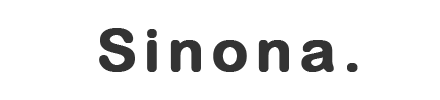
<style>
.page{position:relative;width:440px;height:100px;background:#ffffff}
.page>*{position:absolute;margin:0}
.t1{font:58.8px "ArialRoundedMTBold";letter-spacing:0.1em;color:#333333;font-weight:bold}
</style>
<div class="page">
<p class="t1" style="left:99px;top:28px;width:259px;height:44px">Sinona.</p>
</div>
